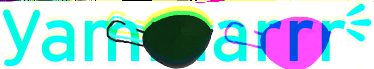
<style>
.page{position:relative;width:374px;height:69px;background:#ffffff}
.page>*{position:absolute;margin:0}
.t1{font:76px "Interstate-Regular"}
</style>
<div class="page">
<p class="t1" style="left:41px;top:20px;width:305px;height:42px">ammarrr</p>
</div>
